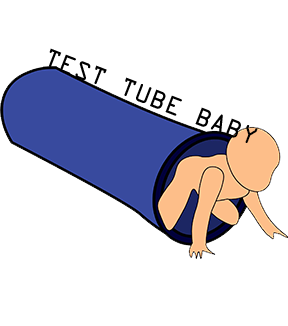
<style>
.page{position:relative;width:288px;height:326px;background:#ffffff}
.page>*{position:absolute;margin:0}
.t1{font:27px "OCRAExtended";color:#000000}
</style>
<div class="page">
<p class="t1" style="left:49px;top:48px;width:209px;height:95px;rotate:21deg">TEST TUBE BABY</p>
</div>
